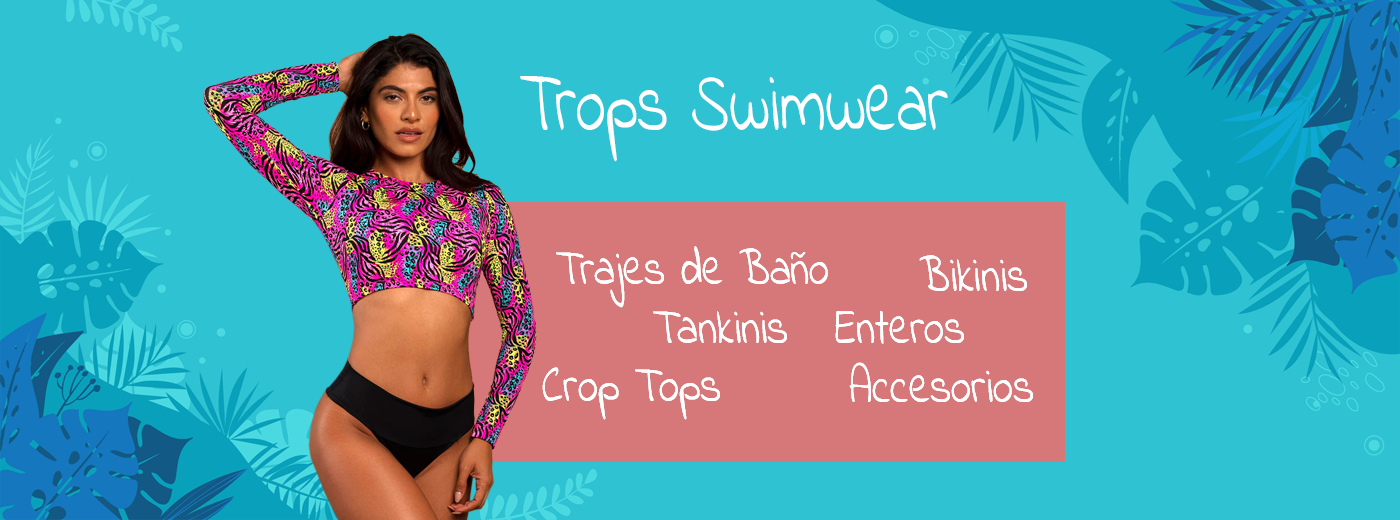
<style>
.page{position:relative;width:1400px;height:520px;background:#2fc2d2}
.page>*{position:absolute;margin:0}
.t1{font:87.8px "IndieFlower";color:#ffffff;scale:0.69 1}
.t2{font:51.8px "IndieFlower";color:#ffffff;scale:0.8 1}
</style>
<div class="page">
<p class="t1" style="left:520px;top:76px;width:428px;height:86px">Trops Swimwear</p>
<p class="t2" style="left:556px;top:246px;width:272px;height:62px">Trajes de Baño</p>
<p class="t2" style="left:556px;top:246px;width:272px;height:62px">Trajes de Baño</p>
<p class="t2" style="left:919px;top:255px;width:108px;height:36px">Bikinis</p>
<p class="t2" style="left:919px;top:255px;width:108px;height:36px">Bikinis</p>
<p class="t2" style="left:653px;top:311px;width:311px;height:33px">Tankinis   Enteros</p>
<p class="t2" style="left:653px;top:311px;width:311px;height:33px">Tankinis   Enteros</p>
<p class="t2" style="left:849px;top:362px;width:184px;height:40px">Accesorios</p>
<p class="t2" style="left:849px;top:362px;width:184px;height:40px">Accesorios</p>
<p class="t2" style="left:542px;top:367px;width:178px;height:53px">Crop Tops</p>
<p class="t2" style="left:542px;top:367px;width:178px;height:53px">Crop Tops</p>
</div>
